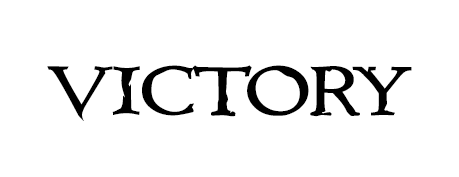
<style>
.page{position:relative;width:459px;height:177px;background:#ffffff}
.page>*{position:absolute;margin:0}
.t1{font:70px "Immortal";color:#000000}
</style>
<div class="page">
<p class="t1" style="left:47px;top:65px;width:365px;height:56px">VICTORY</p>
</div>
